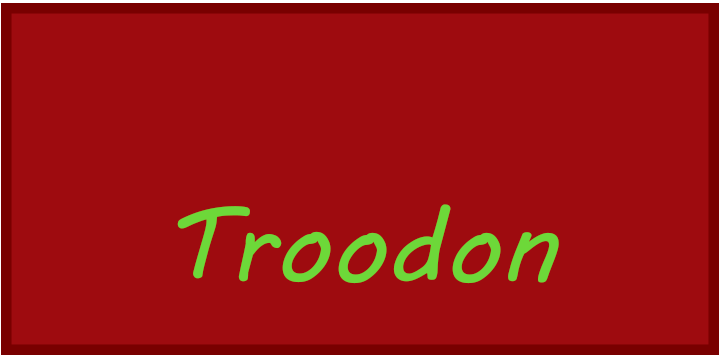
<style>
.page{position:relative;width:720px;height:360px;background:#9e0b0f}
.page>*{position:absolute;margin:0}
.t1{font:100px "MVBoli";color:#6dd839;scale:1.06 1}
</style>
<div class="page">
<p class="t1" style="left:177px;top:204px;width:382px;height:80px">Troodon</p>
</div>
